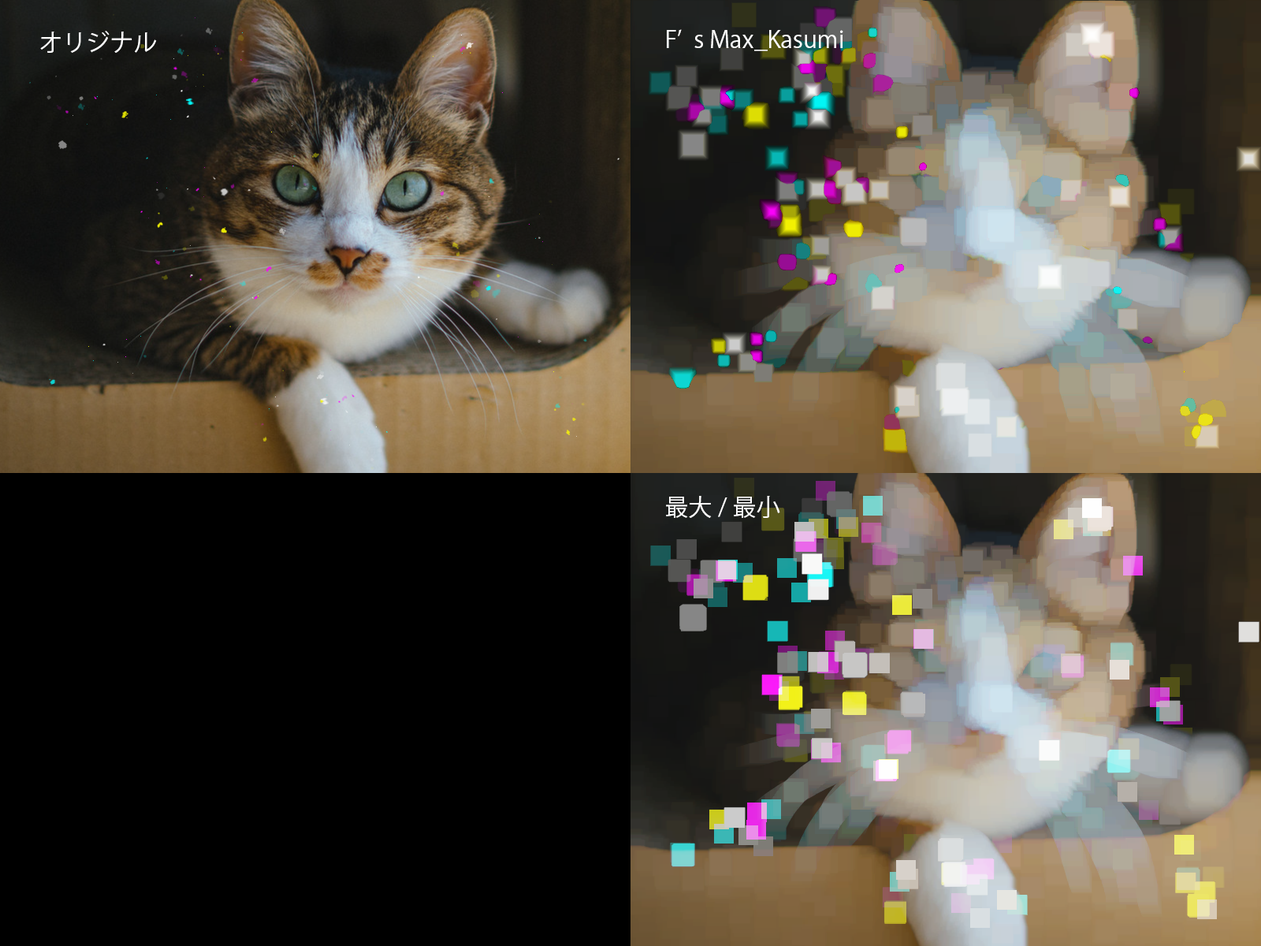
<style>
.page{position:relative;width:1261px;height:946px;background:#000000}
.page>*{position:absolute;margin:0}
.t1{font:23.6px "KozGoPr6N-Regular";color:#ffffff}
</style>
<div class="page">
<p class="t1" style="left:667px;top:29px;width:176px;height:22px">F’s Max_Kasumi</p>
<p class="t1" style="left:40px;top:31px;width:117px;height:22px">オリジナル</p>
<p class="t1" style="left:666px;top:496px;width:114px;height:22px">最大/最小</p>
</div>
